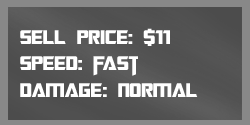
<style>
.page{position:relative;width:250px;height:125px}
.page>*{position:absolute;margin:0}
.t1{font:22px "TransformersMovie";color:#ffffff}
.t2{font:22px "TransformersMovie";letter-spacing:0.02em;color:#ffffff}
.t3{font:22px "TransformersMovie";letter-spacing:-0.1em;color:#ffffff}
</style>
<div class="page">
<p class="t1" style="left:20px;top:28px;width:178px;height:69px">sell p<span class="t2">ri</span>ce: $11<br>spee<span class="t2">d</span>: <span class="t3">f</span>ast<br>dama<span class="t2">ge</span>: n<span class="t2">o</span>rmal</p>
</div>
